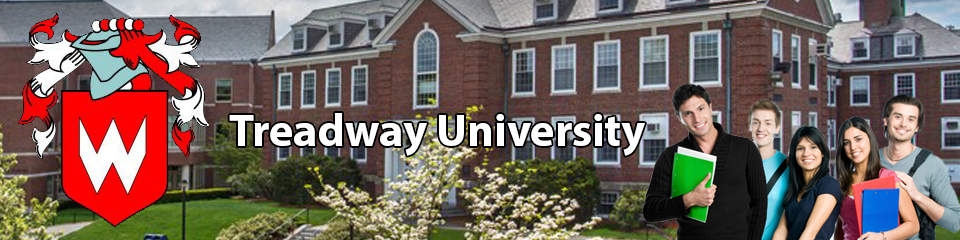
<style>
.page{position:relative;width:960px;height:240px}
.page>*{position:absolute;margin:0}
.t1{font:45.8px "MyriadPro-Bold";color:#ffffff}
</style>
<div class="page">
<p class="t1" style="left:229px;top:113px;width:416px;height:43px">Treadway University</p>
</div>
